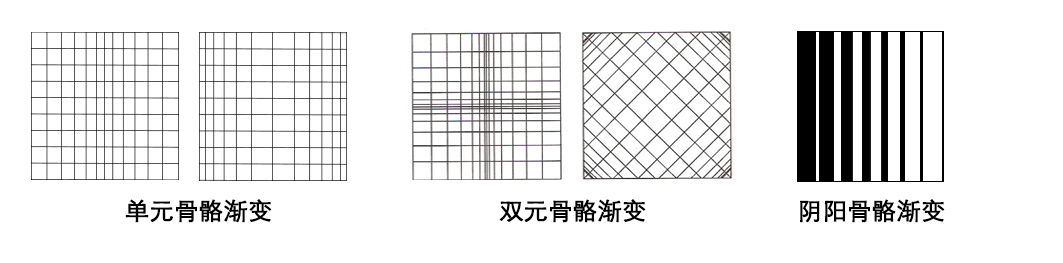
<style>
.page{position:relative;width:1063px;height:263px;background:#ffffff}
.page>*{position:absolute;margin:0}
.t1{font:24px "STXihei";color:#000000;font-weight:bold}
</style>
<div class="page">
<p class="t1" style="left:125px;top:199px;width:147px;height:24px">单元骨骼渐变</p>
<p class="t1" style="left:499px;top:199px;width:147px;height:24px">双元骨骼渐变</p>
<p class="t1" style="left:800px;top:199px;width:145px;height:24px">阴阳骨骼渐变</p>
</div>
